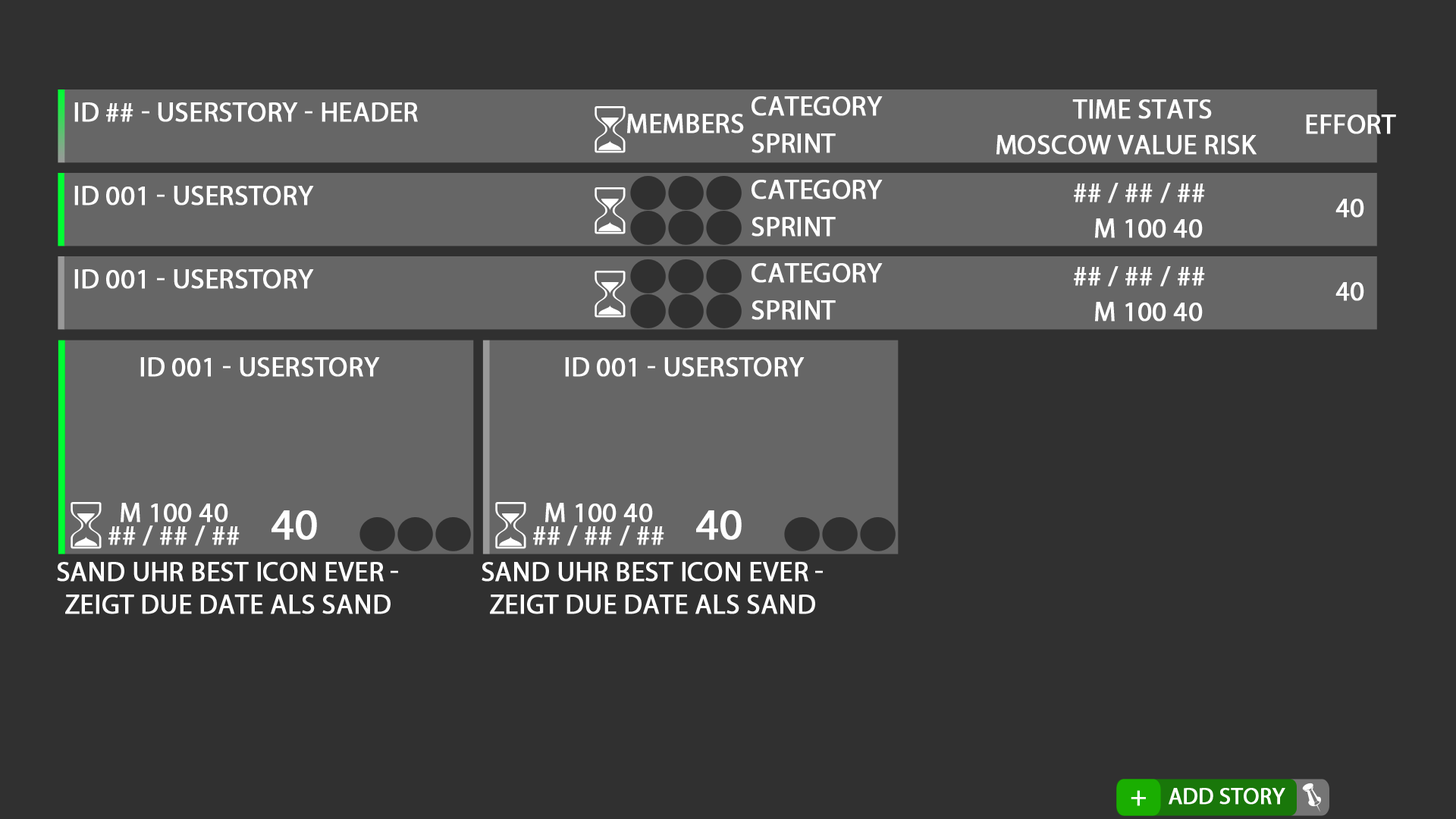
<style>
.page{position:relative;width:1456px;height:819px;background:#303030}
.page>*{position:absolute;margin:0}
.t1{font:27.3px "MyriadPro-Regular";color:#ffffff;text-transform:uppercase;font-weight:bold}
.t2{font:43.9px "MyriadPro-Regular";color:#ffffff;text-transform:uppercase;font-weight:bold}
.t3{font:27.3px/24.8px "MyriadPro-Regular";color:#ffffff;text-transform:uppercase;font-weight:bold}
.t4{font:22.7px "MyriadPro-Regular";color:#ffffff;text-transform:uppercase;font-weight:bold}
</style>
<div class="page">
<p class="t1" style="left:751px;top:96px;width:132px;height:20px">Category</p>
<p class="t1" style="left:1072px;top:99px;width:140px;height:20px">Time stats</p>
<p class="t1" style="left:74px;top:102px;width:344px;height:20px">ID ## - USERStory - Header</p>
<p class="t1" style="left:627px;top:114px;width:117px;height:19px">Members</p>
<p class="t1" style="left:1306px;top:115px;width:90px;height:19px">effort</p>
<p class="t1" style="left:751px;top:133px;width:85px;height:20px">Sprint</p>
<p class="t1" style="left:996px;top:135px;width:261px;height:20px">Moscow value risk</p>
<p class="t1" style="left:74px;top:186px;width:240px;height:20px">ID 001 - USERStory</p>
<p class="t1" style="left:751px;top:180px;width:132px;height:19px">Category</p>
<p class="t1" style="left:1074px;top:183px;width:131px;height:20px">## / ## / ##</p>
<p class="t1" style="left:1335px;top:199px;width:29px;height:19px">40</p>
<p class="t1" style="left:751px;top:217px;width:85px;height:20px">Sprint</p>
<p class="t1" style="left:1095px;top:218px;width:108px;height:20px">m 100 40</p>
<p class="t1" style="left:74px;top:269px;width:240px;height:20px">ID 001 - USERStory</p>
<p class="t1" style="left:751px;top:263px;width:132px;height:20px">Category</p>
<p class="t1" style="left:1074px;top:266px;width:131px;height:21px">## / ## / ##</p>
<p class="t1" style="left:1335px;top:282px;width:29px;height:19px">40</p>
<p class="t1" style="left:751px;top:300px;width:85px;height:20px">Sprint</p>
<p class="t1" style="left:1095px;top:302px;width:108px;height:20px">m 100 40</p>
<p class="t1" style="left:140px;top:357px;width:240px;height:20px">ID 001 - USERStory</p>
<p class="t1" style="left:565px;top:357px;width:240px;height:20px">ID 001 - USERStory</p>
<p class="t1" style="left:121px;top:503px;width:107px;height:19px">M 100 40</p>
<p class="t1" style="left:545px;top:503px;width:108px;height:19px">M 100 40</p>
<p class="t2" style="left:271px;top:510px;width:46px;height:30px">40</p>
<p class="t2" style="left:696px;top:510px;width:46px;height:30px">40</p>
<p class="t1" style="left:108px;top:526px;width:132px;height:20px">## / ## / ##</p>
<p class="t1" style="left:533px;top:526px;width:131px;height:20px">## / ## / ##</p>
<p class="t3" style="left:57px;top:562px;width:341px;height:52px;text-align:center">Sand uhr best icon ever -<br>zeigt due date als sand</p>
<p class="t3" style="left:482px;top:562px;width:341px;height:52px;text-align:center">Sand uhr best icon ever -<br>zeigt due date als sand</p>
<p class="t1" style="left:1131px;top:790px;width:15px;height:16px">+</p>
<p class="t4" style="left:1169px;top:788px;width:116px;height:17px">add Story</p>
</div>
